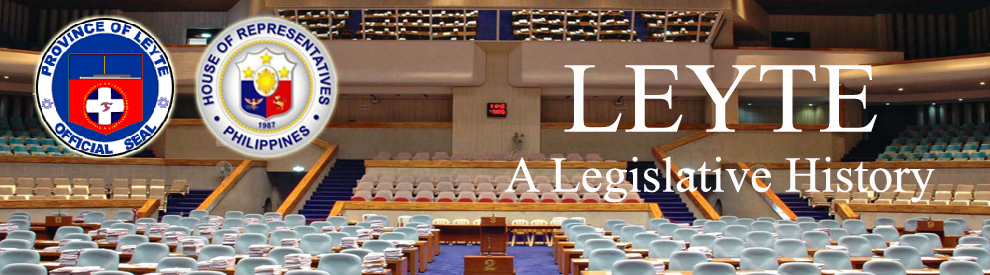
<style>
.page{position:relative;width:990px;height:275px}
.page>*{position:absolute;margin:0}
.t1{font:50px "TimesNewRomanPSMT";color:#fdfcfc}
.t2{font:100px "TimesNewRomanPSMT";color:#fdfdfd}
</style>
<div class="page">
<p class="t1" style="left:504px;top:65px;width:431px;height:138px;text-align:center"><span class="t2">LEYTE<br></span>A Legislative History</p>
</div>
